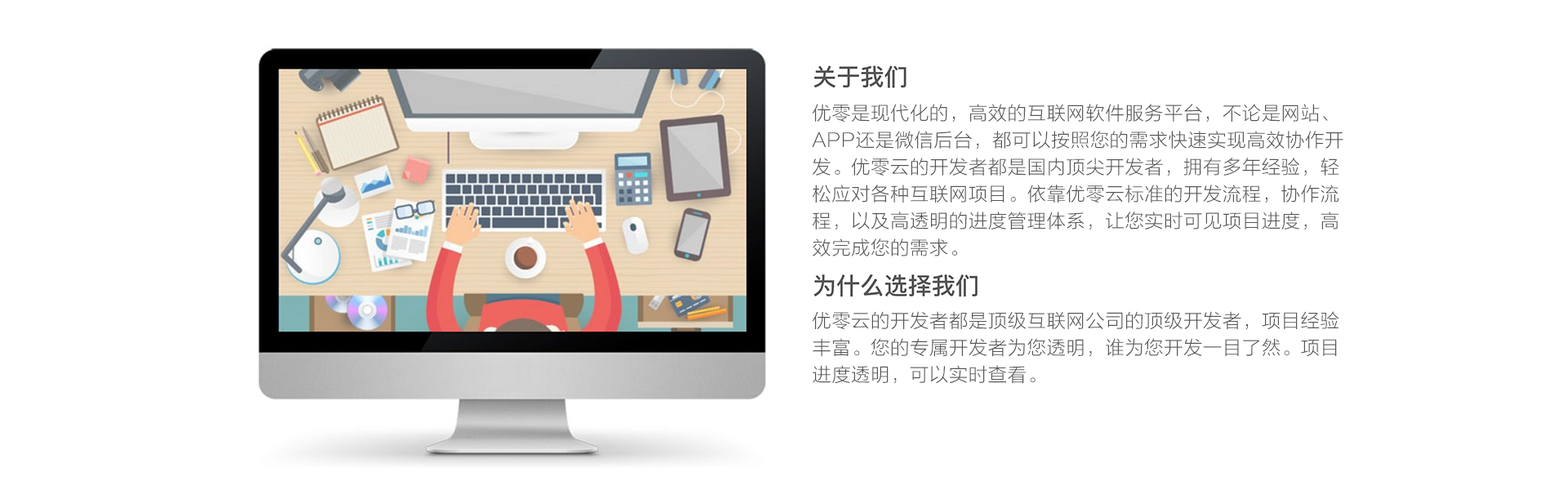
<style>
.page{position:relative;width:1568px;height:490px;background:#ffffff}
.page>*{position:absolute;margin:0}
.t1{font:18.8px/26.9px "FZLTXHK--GBK1-0";letter-spacing:0.04em;color:#575353}
</style>
<div class="page">
<p class="t1" style="left:812px;top:104px;width:531px;height:152px">优零是现代化的，高效的互联网软件服务平台，不论是网站、APP还是微信后台，都可以按照您的需求快速实现高效协作开发。优零云的开发者都是国内顶尖开发者，拥有多年经验，轻松应对各种互联网项目。依靠优零云标准的开发流程，协作流程，以及高透明的进度管理体系，让您实时可见项目进度，高效完成您的需求。</p>
<p class="t1" style="left:813px;top:311px;width:526px;height:73px">优零云的开发者都是顶级互联网公司的顶级开发者，项目经验丰富。您的专属开发者为您透明，谁为您开发一目了然。项目进度透明，可以实时查看。</p>
</div>
